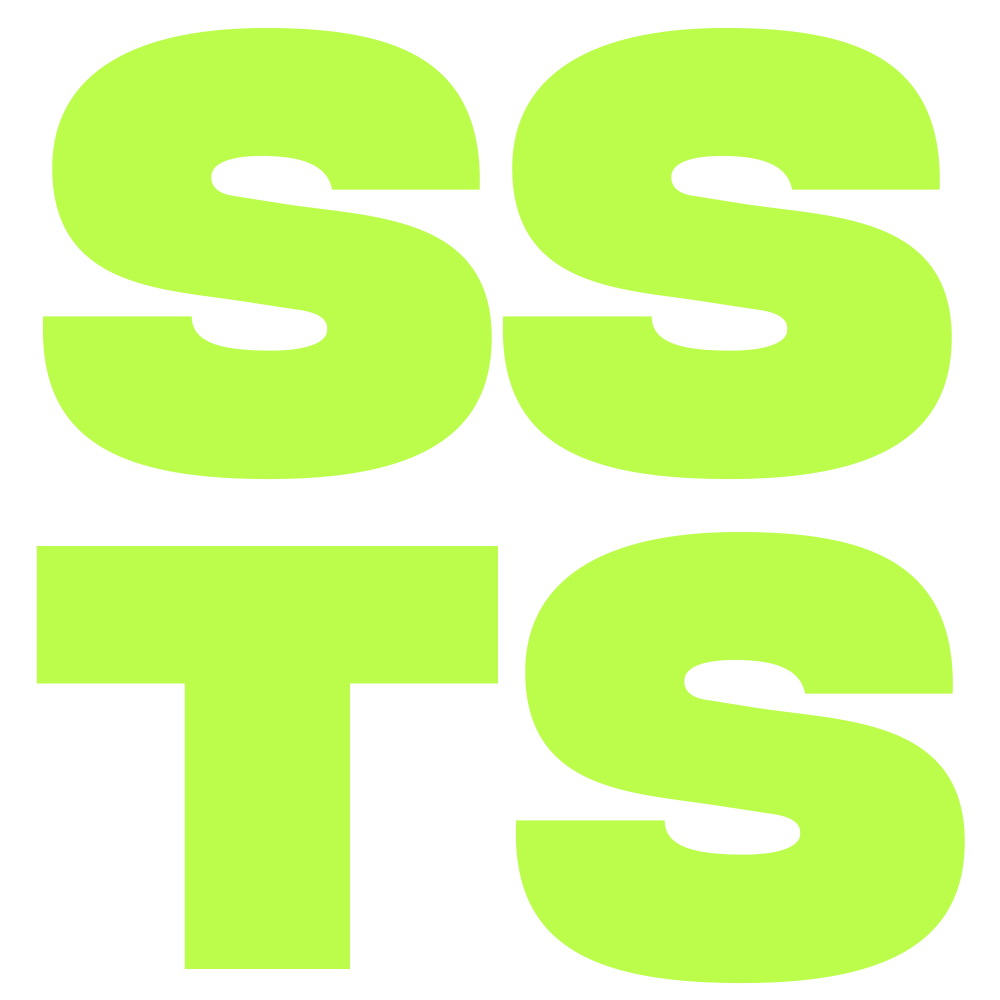
<style>
.page{position:relative;width:1000px;height:1000px;background:#bcfd4c}
.page>*{position:absolute;margin:0}
.t1{font:604.2px/504.2px "IntegralCF-Heavy";color:#bcfd4c;text-transform:uppercase}
</style>
<div class="page">
<p class="t1" style="left:36px;top:27px;width:929px;height:957px;text-align:center">ss<br>ts</p>
</div>
